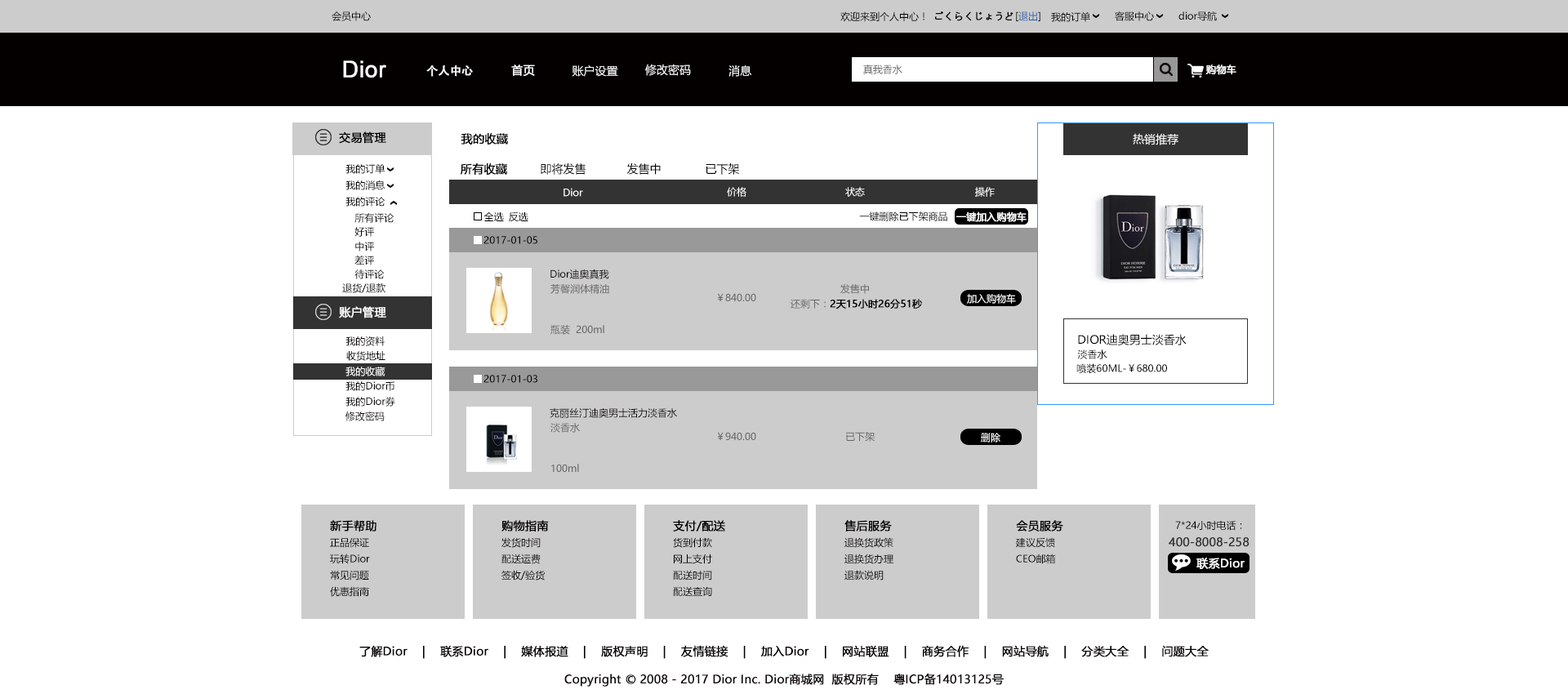
<style>
.page{position:relative;width:1568px;height:694px;background:#ffffff}
.page>*{position:absolute;margin:0}
.t1{font:9.8px "MicrosoftYaHei";color:#040000}
.t2{font:9.8px "MicrosoftYaHei";color:#040000;font-weight:bold}
.t3{font:9.8px "MicrosoftYaHei";color:#2a62ae}
.t4{font:22.9px "ArialMT";color:#ffffff;font-weight:bold}
.t5{font:11.4px "AdobeHeitiStd-Regular";color:#ffffff;font-weight:bold}
.t6{font:11.4px "MicrosoftYaHei";color:#ffffff;font-weight:bold}
.t7{font:11.4px "MicrosoftYaHei";color:#ffffff}
.t8{font:9.8px "MicrosoftYaHei";color:#666666}
.t9{font:9.8px "MicrosoftYaHei";color:#ffffff;font-weight:bold}
.t10{font:11.4px "MicrosoftYaHei";color:#000000;font-weight:bold}
.t11{font:9.8px "MicrosoftYaHei";color:#000000}
.t12{font:11.4px "MicrosoftYaHei";color:#000000}
.t13{font:9.8px "MicrosoftYaHei";color:#ffffff}
.t14{font:9.8px "MicrosoftYaHei";color:#000000;font-weight:bold}
.t15{font:11.4px "MicrosoftYaHei";color:#040000;font-weight:bold}
.t16{font:11.4px "MicrosoftYaHei";color:#333333;font-weight:bold}
</style>
<div class="page">
<p class="t1" style="left:332px;top:11px;width:39px;height:10px">会员中心</p>
<p class="t1" style="left:840px;top:11px;width:84px;height:11px">欢迎来到个人中心！</p>
<p class="t2" style="left:935px;top:11px;width:78px;height:10px">ごくらくじょうど</p>
<p class="t3" style="left:1016px;top:11px;width:24px;height:10px"><span class="t1">[</span>退出<span class="t1">]</span></p>
<p class="t1" style="left:1051px;top:11px;width:39px;height:11px">我的订单</p>
<p class="t1" style="left:1115px;top:11px;width:39px;height:10px">客服中心</p>
<p class="t1" style="left:1178px;top:11px;width:39px;height:10px">dior导航</p>
<p class="t4" style="left:343px;top:60px;width:43px;height:18px">Dior</p>
<p class="t5" style="left:426px;top:65px;width:47px;height:12px">个人中心</p>
<p class="t6" style="left:511px;top:65px;width:24px;height:11px">首页</p>
<p class="t7" style="left:572px;top:65px;width:46px;height:12px">账户设置</p>
<p class="t7" style="left:645px;top:64px;width:46px;height:12px">修改密码</p>
<p class="t7" style="left:728px;top:65px;width:24px;height:12px">消息</p>
<p class="t8" style="left:863px;top:65px;width:39px;height:9px">真我香水</p>
<p class="t9" style="left:1205px;top:65px;width:31px;height:10px">购物车</p>
<p class="t10" style="left:339px;top:131px;width:47px;height:13px">交易管理</p>
<p class="t10" style="left:461px;top:133px;width:47px;height:12px">我的收藏</p>
<p class="t7" style="left:1133px;top:133px;width:45px;height:12px">热销推荐</p>
<p class="t11" style="left:345px;top:163px;width:40px;height:11px">我的订单</p>
<p class="t10" style="left:460px;top:163px;width:47px;height:12px">所有收藏</p>
<p class="t12" style="left:541px;top:163px;width:45px;height:12px">即将发售</p>
<p class="t12" style="left:626px;top:163px;width:35px;height:12px">发售中</p>
<p class="t12" style="left:706px;top:163px;width:34px;height:12px">已下架</p>
<p class="t11" style="left:345px;top:180px;width:40px;height:10px">我的消息</p>
<p class="t11" style="left:345px;top:197px;width:40px;height:10px">我的评论</p>
<p class="t13" style="left:564px;top:188px;width:19px;height:9px">Dior</p>
<p class="t13" style="left:727px;top:187px;width:19px;height:10px">价格</p>
<p class="t13" style="left:845px;top:187px;width:20px;height:10px">状态</p>
<p class="t13" style="left:975px;top:187px;width:20px;height:10px">操作</p>
<p class="t11" style="left:354px;top:213px;width:40px;height:10px">所有评论</p>
<p class="t11" style="left:483px;top:212px;width:21px;height:9px">全选</p>
<p class="t11" style="left:509px;top:212px;width:19px;height:10px">反选</p>
<p class="t11" style="left:859px;top:212px;width:88px;height:9px">一键删除已下架商品</p>
<p class="t9" style="left:956px;top:212px;width:71px;height:10px">一键加入购物车</p>
<p class="t1" style="left:354px;top:227px;width:20px;height:10px">好评</p>
<p class="t1" style="left:355px;top:242px;width:19px;height:10px">中评</p>
<p class="t11" style="left:483px;top:236px;width:54px;height:8px">2017-01-05</p>
<p class="t1" style="left:354px;top:255px;width:20px;height:10px">差评</p>
<p class="t1" style="left:354px;top:270px;width:31px;height:9px">待评论</p>
<p class="t11" style="left:550px;top:270px;width:59px;height:9px">Dior迪奥真我</p>
<p class="t11" style="left:342px;top:283px;width:43px;height:10px">退货/退款</p>
<p class="t8" style="left:550px;top:284px;width:59px;height:10px">芳馨润体精油</p>
<p class="t8" style="left:717px;top:293px;width:39px;height:8px">￥840.00</p>
<p class="t8" style="left:840px;top:284px;width:29px;height:10px">发售中</p>
<p class="t13" style="left:967px;top:294px;width:49px;height:10px">加入购物车</p>
<p class="t14" style="left:791px;top:299px;width:131px;height:11px"><span class="t8">还剩下：</span>2天15小时26分51秒</p>
<p class="t6" style="left:339px;top:306px;width:47px;height:12px">账户管理</p>
<p class="t8" style="left:550px;top:325px;width:54px;height:10px">瓶装  200ml</p>
<p class="t1" style="left:345px;top:336px;width:40px;height:10px">我的资料</p>
<p class="t12" style="left:1078px;top:334px;width:109px;height:11px">DIOR迪奥男士淡香水</p>
<p class="t1" style="left:346px;top:351px;width:39px;height:10px">收货地址</p>
<p class="t11" style="left:1077px;top:350px;width:30px;height:9px">淡香水</p>
<p class="t11" style="left:1076px;top:363px;width:91px;height:11px">喷装60ML-￥680.00</p>
<p class="t13" style="left:345px;top:367px;width:40px;height:9px">我的收藏</p>
<p class="t11" style="left:483px;top:375px;width:54px;height:8px">2017-01-03</p>
<p class="t11" style="left:345px;top:381px;width:49px;height:10px">我的Dior币</p>
<p class="t1" style="left:345px;top:397px;width:50px;height:10px">我的Dior券</p>
<p class="t1" style="left:345px;top:412px;width:40px;height:9px">修改密码</p>
<p class="t11" style="left:550px;top:408px;width:127px;height:10px">克丽丝汀迪奥男士活力淡香水</p>
<p class="t8" style="left:550px;top:423px;width:30px;height:10px">淡香水</p>
<p class="t8" style="left:717px;top:432px;width:39px;height:8px">￥940.00</p>
<p class="t8" style="left:846px;top:432px;width:29px;height:10px">已下架</p>
<p class="t13" style="left:981px;top:433px;width:19px;height:10px">删除</p>
<p class="t8" style="left:551px;top:464px;width:28px;height:8px">100ml</p>
<p class="t15" style="left:330px;top:520px;width:46px;height:12px">新手帮助</p>
<p class="t15" style="left:501px;top:520px;width:48px;height:12px">购物指南</p>
<p class="t15" style="left:673px;top:520px;width:52px;height:12px">支付/配送</p>
<p class="t15" style="left:844px;top:520px;width:48px;height:12px">售后服务</p>
<p class="t15" style="left:1016px;top:520px;width:47px;height:12px">会员服务</p>
<p class="t1" style="left:1175px;top:520px;width:67px;height:11px">7*24小时电话：</p>
<p class="t1" style="left:330px;top:538px;width:39px;height:10px">正品保证</p>
<p class="t1" style="left:501px;top:537px;width:40px;height:11px">发货时间</p>
<p class="t1" style="left:673px;top:537px;width:39px;height:11px">货到付款</p>
<p class="t1" style="left:844px;top:537px;width:49px;height:11px">退换货政策</p>
<p class="t1" style="left:1016px;top:537px;width:39px;height:11px">建议反馈</p>
<p class="t16" style="left:1169px;top:537px;width:81px;height:10px">400-8008-258</p>
<p class="t1" style="left:330px;top:554px;width:40px;height:10px">玩转Dior</p>
<p class="t1" style="left:501px;top:554px;width:40px;height:10px">配送运费</p>
<p class="t1" style="left:674px;top:554px;width:38px;height:10px">网上支付</p>
<p class="t1" style="left:844px;top:554px;width:49px;height:10px">退换货办理</p>
<p class="t1" style="left:1016px;top:554px;width:40px;height:10px">CEO邮箱</p>
<p class="t6" style="left:1196px;top:558px;width:49px;height:11px">联系Dior</p>
<p class="t1" style="left:330px;top:570px;width:39px;height:11px">常见问题</p>
<p class="t1" style="left:501px;top:570px;width:44px;height:11px">签收/验货</p>
<p class="t1" style="left:673px;top:570px;width:39px;height:11px">配送时间</p>
<p class="t1" style="left:844px;top:570px;width:40px;height:11px">退款说明</p>
<p class="t1" style="left:330px;top:586px;width:39px;height:11px">优惠指南</p>
<p class="t1" style="left:673px;top:586px;width:39px;height:10px">配送查询</p>
<p class="t15" style="left:359px;top:645px;width:850px;height:14px">了解Dior    |    联系Dior    |    媒体报道    |    版权声明    |    友情链接    |    加入Dior    |    网站联盟    |    商务合作    |    网站导航    |    分类大全    |    问题大全</p>
<p class="t10" style="left:564px;top:673px;width:440px;height:14px">Copyright © 2008 - 2017 Dior Inc. Dior商城网  版权所有    粤ICP备14013125号</p>
</div>
